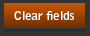
<style>
.page{position:relative;width:90px;height:36px;background:#333333}
.page>*{position:absolute;margin:0}
.t1{font:12px "BellGothicStd-Bold";color:#ffffff;scale:1.05 1}
</style>
<div class="page">
<p class="t1" style="left:14px;top:11px;width:60px;height:9px">Clear fields</p>
</div>
